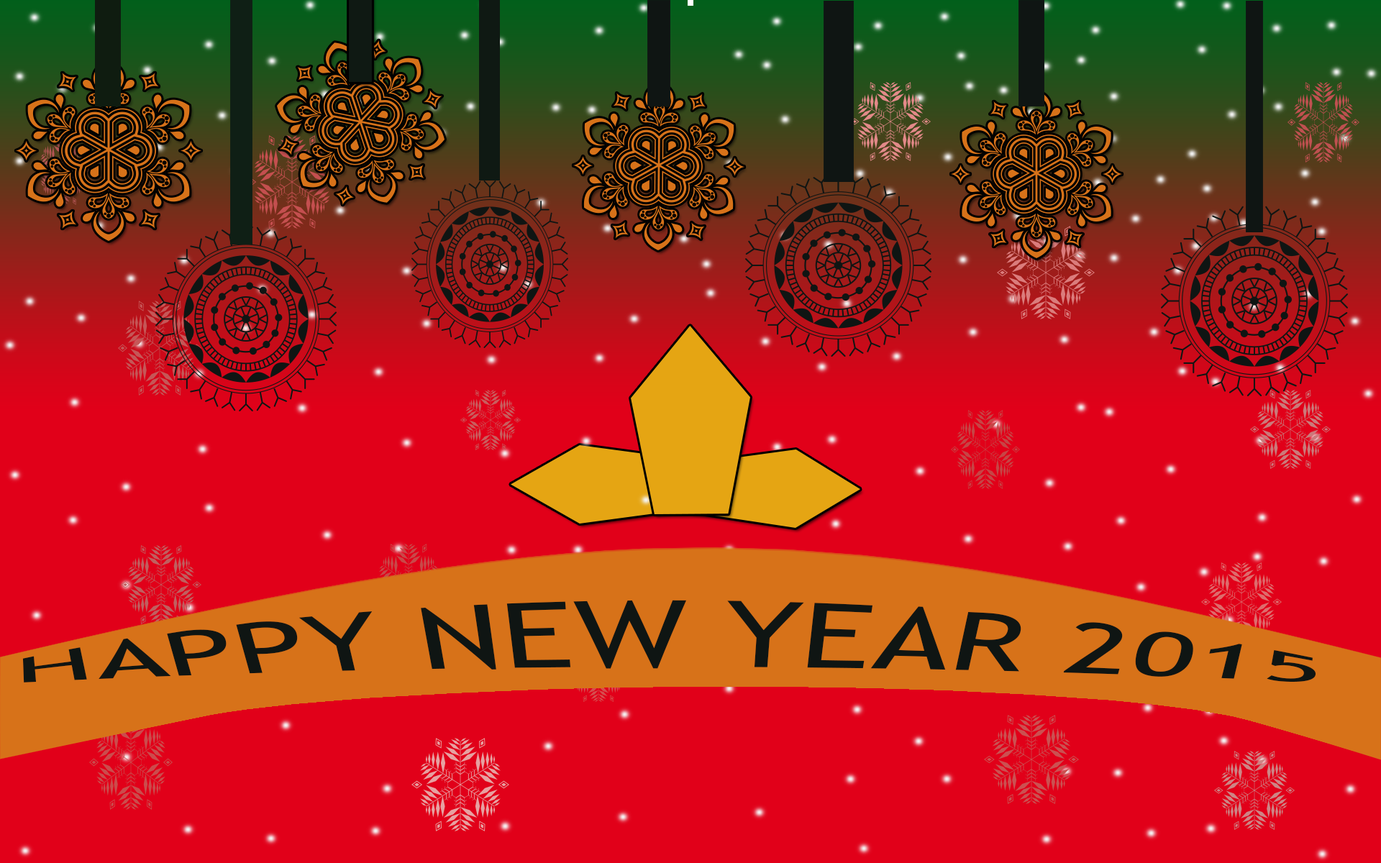
<style>
.page{position:relative;width:1381px;height:863px;background:#e10019}
.page>*{position:absolute;margin:0}
.t1{font:31.7px/9.5px "TrebuchetMS";letter-spacing:0.01em;color:#0f1513;scale:3.97 1}
</style>
<div class="page">
<p class="t1" style="left:22px;top:600px;width:1295px;height:83px;text-align:center">HAPPY NEW YEAR 2015</p>
</div>
